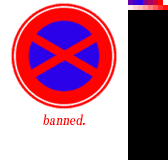
<style>
.page{position:relative;width:168px;height:160px;background:#ffffff}
.page>*{position:absolute;margin:0}
.t1{font:14px "HGMinchoB";letter-spacing:-0.025em;color:#fe0301;font-style:italic}
</style>
<div class="page">
<p class="t1" style="left:43px;top:114px;width:42px;height:12px">banned.</p>
</div>
